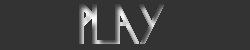
<style>
.page{position:relative;width:250px;height:50px;background:#333333}
.page>*{position:absolute;margin:0}
.t1{font:48px "exoziti";font-weight:bold}
</style>
<div class="page">
<p class="t1" style="left:79px;top:4px;width:85px;height:40px">PLAY</p>
</div>
